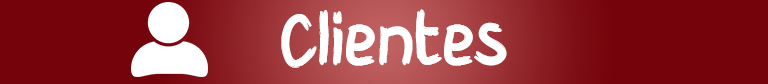
<style>
.page{position:relative;width:768px;height:84px;background:#75030b}
.page>*{position:absolute;margin:0}
.t1{font:63.7px "BrushyCre";color:#ffffff}
</style>
<div class="page">
<p class="t1" style="left:281px;top:9px;width:226px;height:59px">Clientes</p>
</div>
